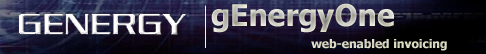
<style>
.page{position:relative;width:486px;height:54px}
.page>*{position:absolute;margin:0}
.t1{font:12px "Tahoma-Bold"}
.t2{font:30px "Tahoma-Bold"}
</style>
<div class="page">
<p class="t1" style="left:211px;top:3px;width:236px;height:48px"><span class="t2">gEnergyOne<br>                   </span>web-enabled invoicing</p>
</div>
